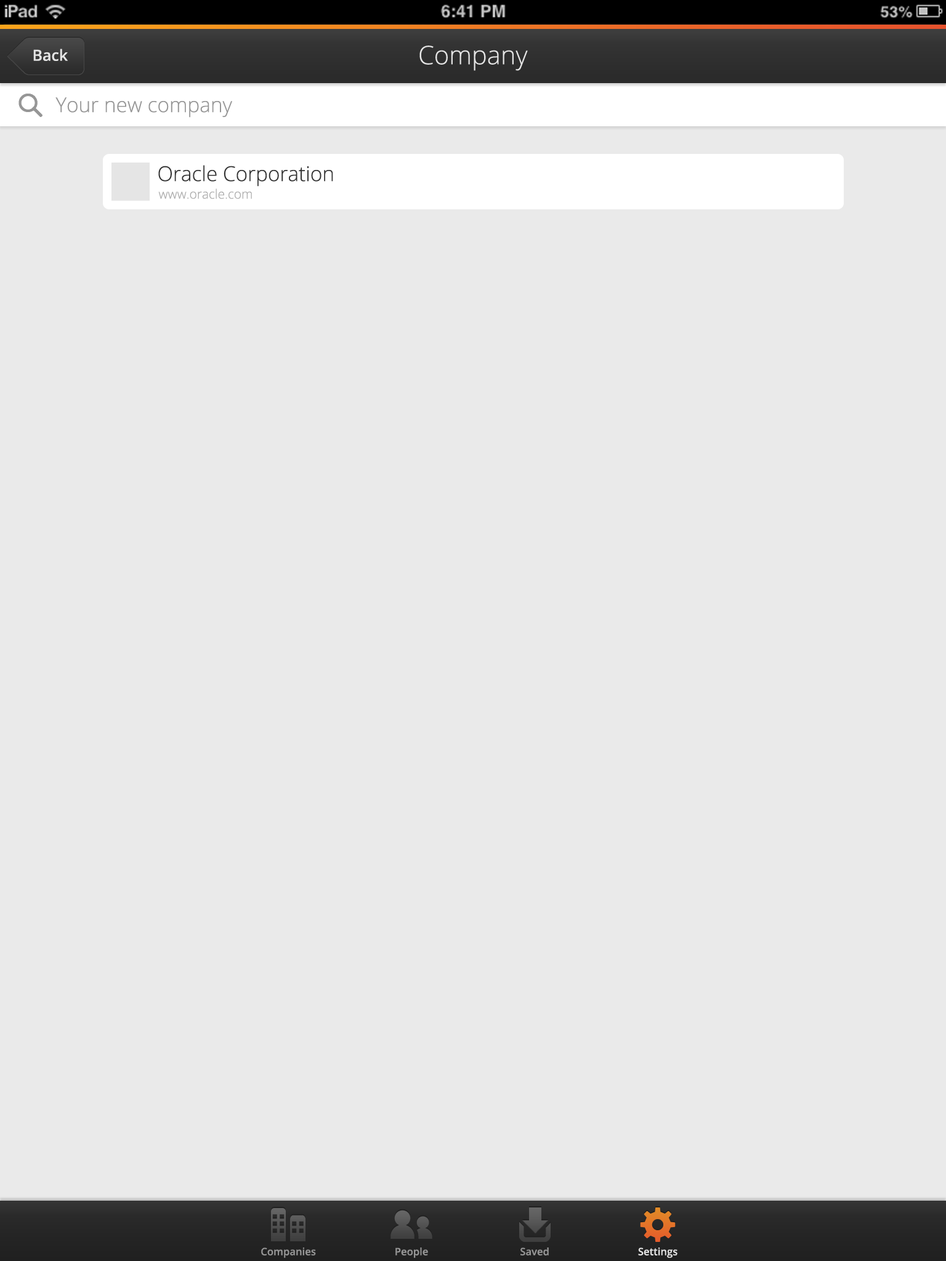
<style>
.page{position:relative;width:946px;height:1261px;background:#eaeaea}
.page>*{position:absolute;margin:0}
.t1{font:15.4px "OpenSans-Semibold";color:#e5e5e5}
.t2{font:25.7px "OpenSans-Light";color:#e5e5e5}
.t3{font:20.5px "OpenSans-Light";color:#969696}
.t4{font:20.5px "OpenSans-Light";color:#343434}
.t5{font:12.8px "OpenSans-Light";color:#aaaaaa}
.t6{font:10.3px "OpenSans-Semibold";color:#969696}
.t7{font:10.3px "OpenSans-Semibold";color:#e5e5e5}
</style>
<div class="page">
<p class="t1" style="left:33px;top:49px;width:35px;height:12px">Back</p>
<p class="t2" style="left:419px;top:46px;width:109px;height:25px">Company</p>
<p class="t3" style="left:55px;top:97px;width:177px;height:21px">Your new company</p>
<p class="t4" style="left:158px;top:165px;width:175px;height:22px">Oracle Corporation</p>
<p class="t5" style="left:158px;top:188px;width:94px;height:11px">www.oracle.com</p>
<p class="t6" style="left:261px;top:1247px;width:55px;height:11px">Companies</p>
<p class="t6" style="left:395px;top:1247px;width:33px;height:11px">People</p>
<p class="t6" style="left:520px;top:1247px;width:29px;height:8px">Saved</p>
<p class="t7" style="left:638px;top:1247px;width:39px;height:11px">Settings</p>
</div>
